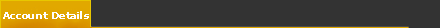
<style>
.page{position:relative;width:440px;height:28px;background:#333333}
.page>*{position:absolute;margin:0}
.t1{font:10px "Verdana-Bold";color:#ffffff}
</style>
<div class="page">
<p class="t1" style="left:3px;top:11px;width:86px;height:8px">Account Details</p>
</div>
